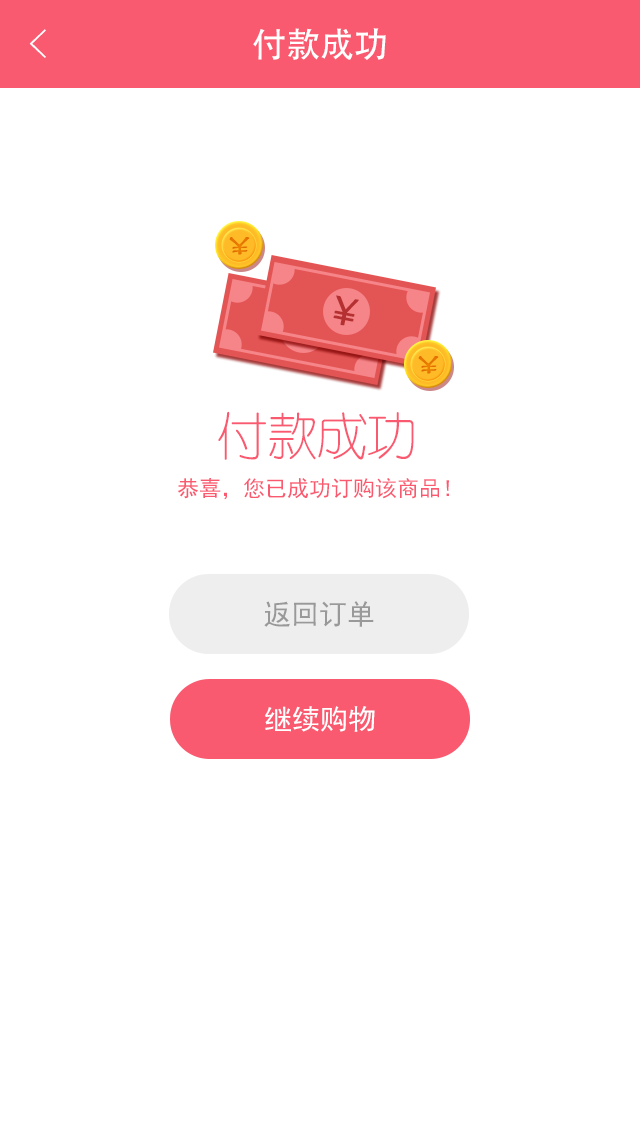
<style>
.page{position:relative;width:640px;height:1136px;background:#ffffff}
.page>*{position:absolute;margin:0}
.t1{font:40px "FZYXJW--GB1-0";color:#ffffff}
.t2{font:34px "AdobeHeitiStd-Regular";color:#ffffff}
.t3{font:30px "FZTJLSFW--GB1-0";color:#f18d01;font-weight:bold}
.t4{font:40px "FZY1JW--GB1-0";color:#b53031;font-weight:bold}
.t5{font:50px "FZY1JW--GB1-0";color:#f95a70}
.t6{font:22px "SimHei";color:#f95a70}
.t7{font:28px "SimHei";color:#999999}
.t8{font:28px "SimHei";color:#ffffff}
</style>
<div class="page">
<p class="t1" style="left:29px;top:29px;width:17px;height:29px">&lt;</p>
<p class="t2" style="left:253px;top:28px;width:133px;height:32px">付款成功</p>
<p class="t3" style="left:229px;top:237px;width:21px;height:18px">￥</p>
<p class="t4" style="left:333px;top:295px;width:26px;height:31px;rotate:11deg">￥</p>
<p class="t3" style="left:418px;top:356px;width:21px;height:18px">￥</p>
<p class="t5" style="left:218px;top:411px;width:196px;height:49px">付款成功</p>
<p class="t6" style="left:178px;top:478px;width:271px;height:22px">恭喜，您已成功订购该商品！</p>
<p class="t7" style="left:264px;top:601px;width:110px;height:26px">返回订单</p>
<p class="t8" style="left:265px;top:706px;width:110px;height:26px">继续购物</p>
</div>
